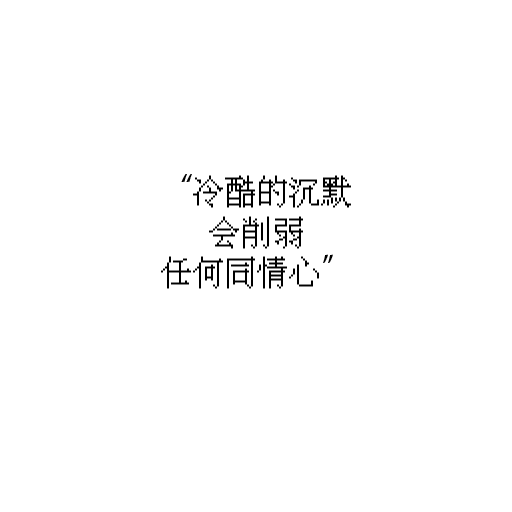
<style>
.page{position:relative;width:512px;height:512px;background:#ffffff}
.page>*{position:absolute;margin:0}
.t1{font:32px/40.5px "IPix";color:#000000}
.t2{font:32px/40.5px "AdobeHeitiStd-Regular";color:#000000}
</style>
<div class="page">
<p class="t1" style="left:161px;top:174px;width:190px;height:115px;text-align:center"><span class="t2">“</span>冷酷的沉默<br>会削弱<br>任何同情心<span class="t2">”</span></p>
</div>
